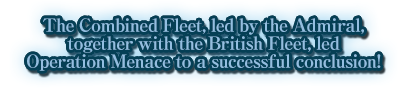
<style>
.page{position:relative;width:408px;height:89px}
.page>*{position:absolute;margin:0}
.t1{font:18px/18px "RyuminPro-ExBold";letter-spacing:-0.04em;color:#93bee0}
</style>
<div class="page">
<p class="t1" style="left:27px;top:18px;width:354px;height:53px;text-align:center">The Combined Fleet, led by the Admiral,<br>together with the British Fleet, led<br>Operation Menace to a successful conclusion!</p>
</div>
